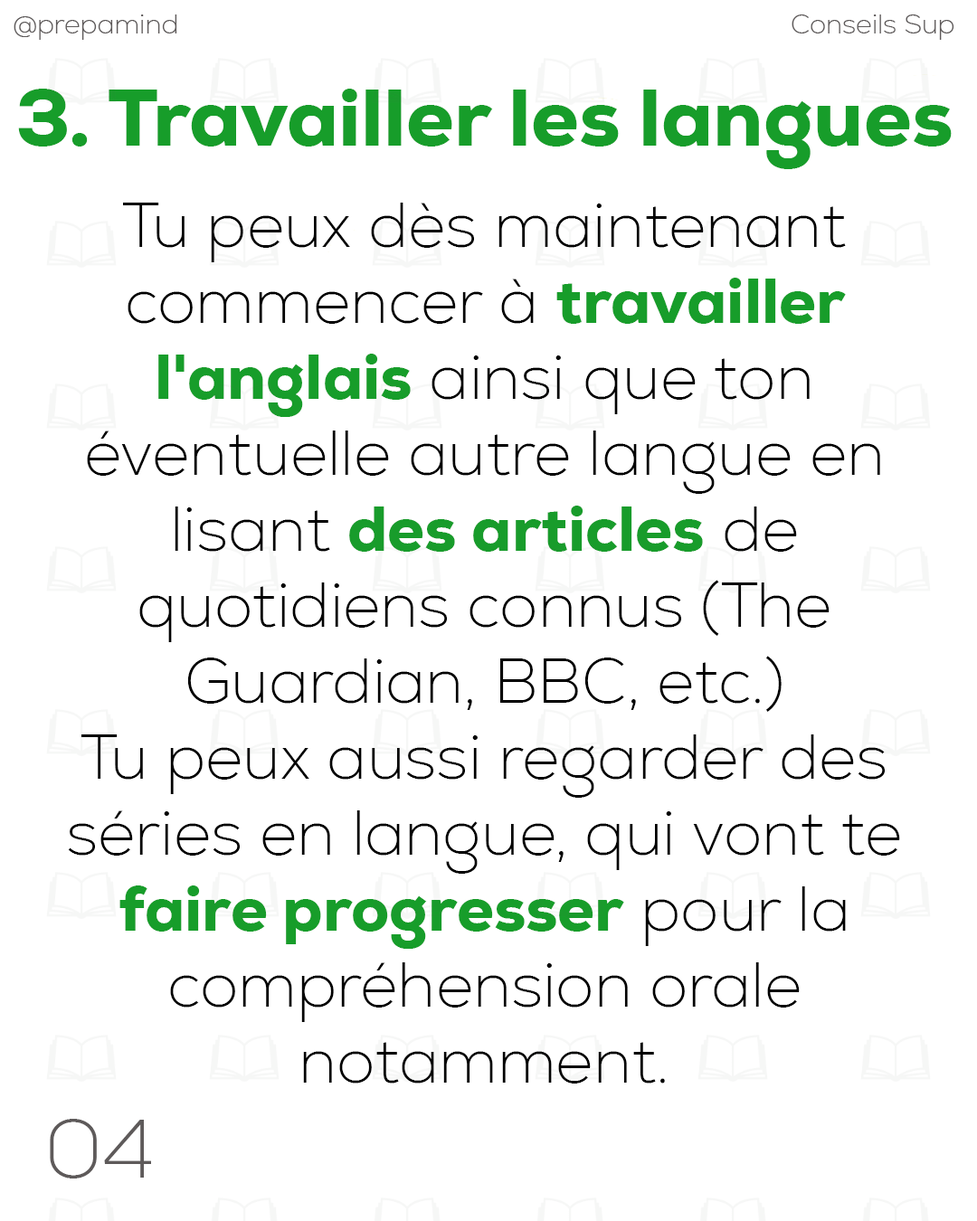
<style>
.page{position:relative;width:977px;height:1221px;background:#ffffff}
.page>*{position:absolute;margin:0}
.t1{font:27.1px "Nexa-ExtraLight";color:#5e5a5a}
.t2{font:81.2px "Nexa-Heavy";color:#179d2a}
.t3{font:63.3px "Nexa-ExtraLight";color:#000000}
.t4{font:63.3px "Nexa-Heavy";color:#179d2a}
.t5{font:63.3px "Nexa-Heavy";color:#189c2b}
.t6{font:81.7px "Nexa-ExtraLight";color:#5e5a5a}
</style>
<div class="page">
<p class="t1" style="left:14px;top:14px;width:163px;height:26px">@prepamind</p>
<p class="t1" style="left:791px;top:14px;width:163px;height:26px">Conseils Sup</p>
<p class="t2" style="left:18px;top:89px;width:933px;height:80px">3. Travailler les langues</p>
<p class="t3" style="left:68px;top:203px;width:832px;height:880px;text-align:center">Tu peux dès maintenant commencer à <span class="t4">travailler l'anglais</span> ainsi que ton éventuelle autre langue en lisant <span class="t5">des articles</span> de quotidiens connus (The Guardian, BBC, etc.)<br>Tu peux aussi regarder des séries en langue, qui vont te <span class="t4">faire progresser</span> pour la compréhension orale notamment.</p>
<p class="t6" style="left:50px;top:1119px;width:101px;height:59px">04</p>
</div>
